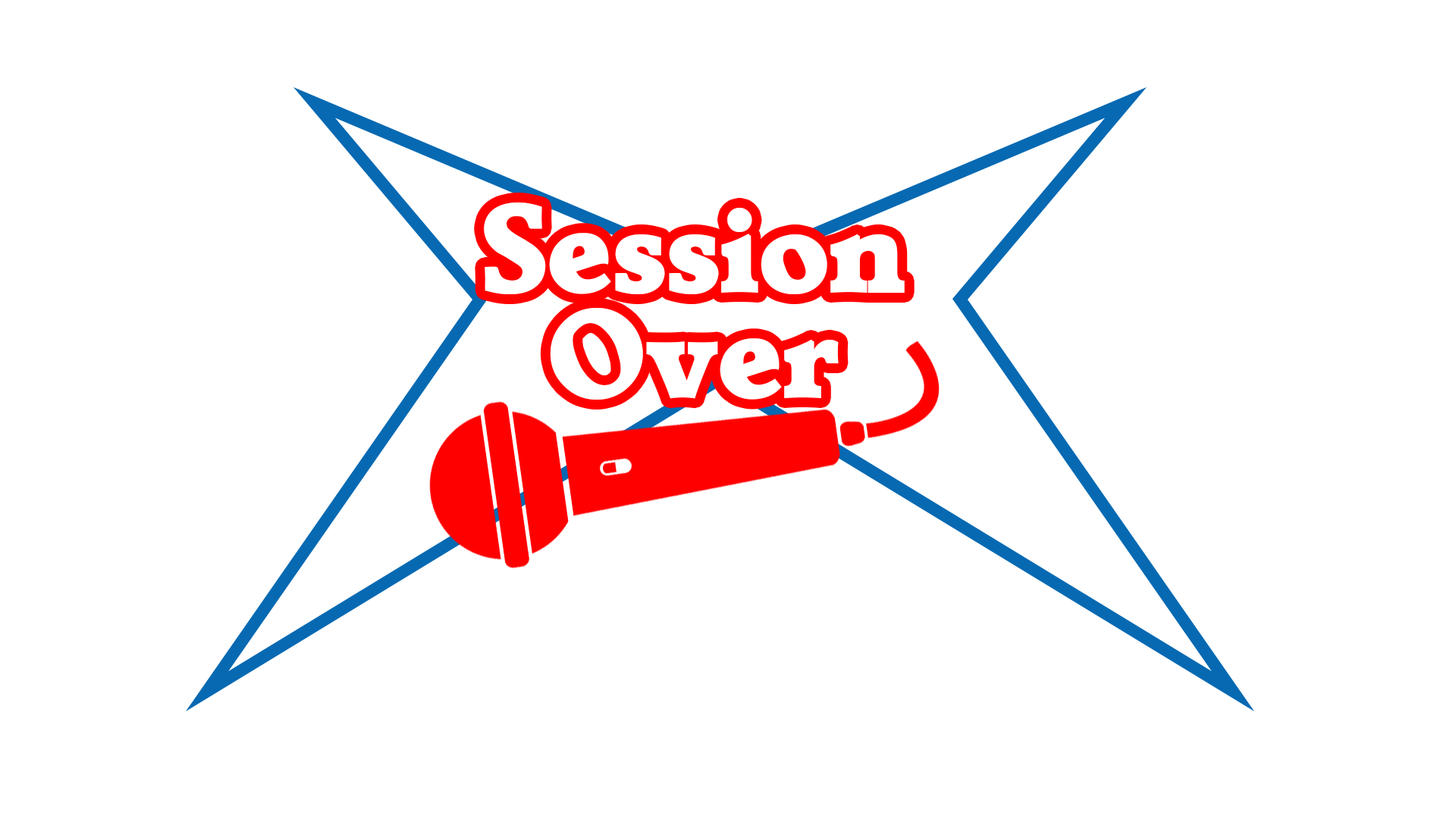
<style>
.page{position:relative;width:1456px;height:819px;background:#ffffff}
.page>*{position:absolute;margin:0}
.t1{font:123.7px "Detente";color:#ffffff}
</style>
<div class="page">
<p class="t1" style="left:484px;top:202px;width:421px;height:92px">Session</p>
<p class="t1" style="left:550px;top:308px;width:289px;height:92px">Over</p>
</div>
